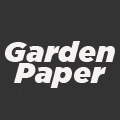
<style>
.page{position:relative;width:120px;height:120px;background:#333333}
.page>*{position:absolute;margin:0}
.t1{font:29.2px "GothamUltra-Italic";letter-spacing:0.02em;color:#f7f2f2}
</style>
<div class="page">
<p class="t1" style="left:5px;top:41px;width:110px;height:21px">Garden</p>
<p class="t1" style="left:14px;top:63px;width:93px;height:25px">Paper</p>
</div>
